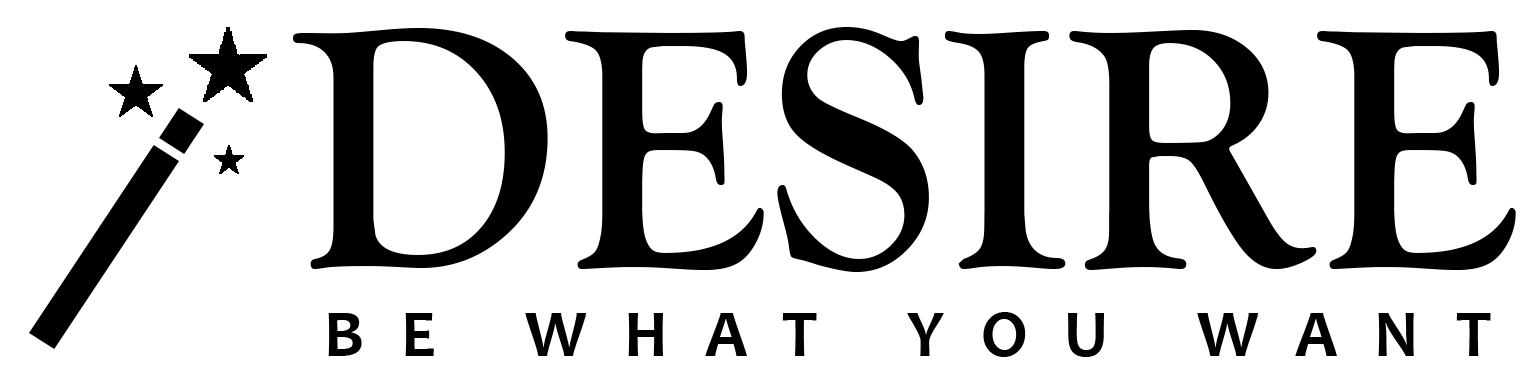
<style>
.page{position:relative;width:1534px;height:386px;background:#ffffff}
.page>*{position:absolute;margin:0}
.t1{font:354.2px "GoudyOldStyleT-Bold";color:#000000}
.t2{font:66.7px "Candara-Bold";letter-spacing:0.56em;color:#000000}
</style>
<div class="page">
<p class="t1" style="left:293px;top:27px;width:1223px;height:245px">DESIRE</p>
<p class="t2" style="left:328px;top:312px;width:1163px;height:45px">BE WHAT YOU WANT</p>
</div>
